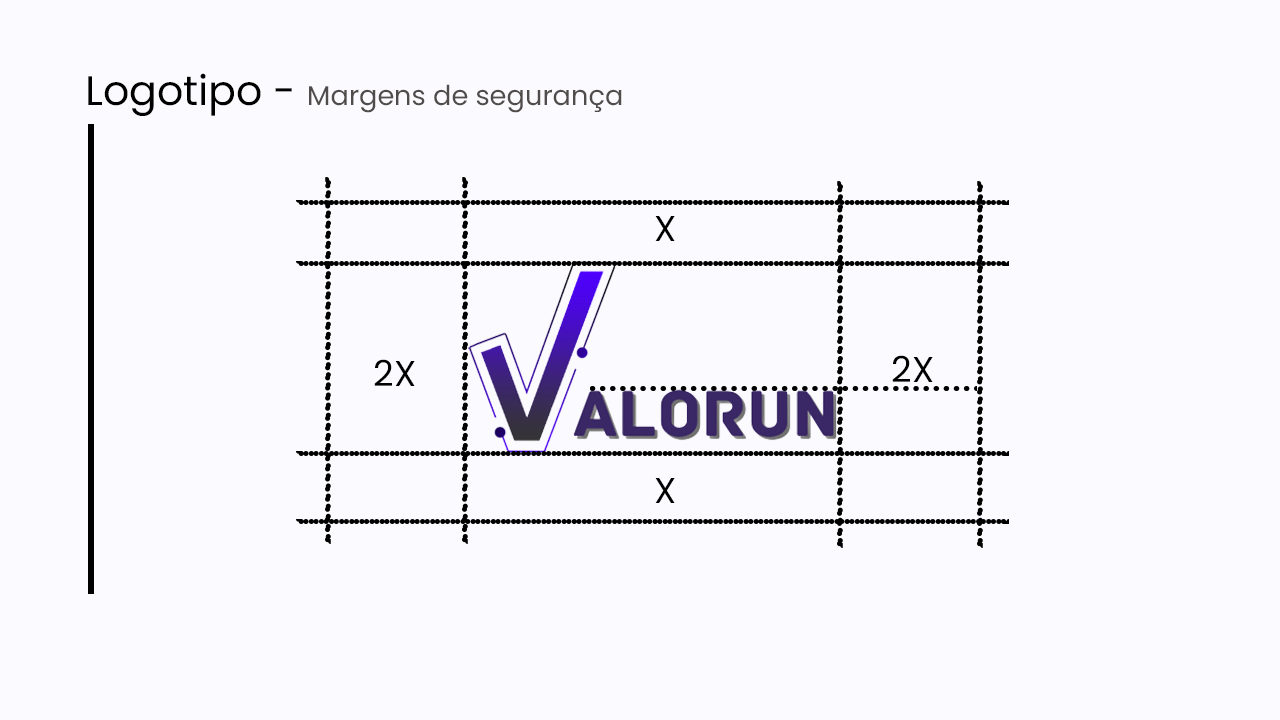
<style>
.page{position:relative;width:1280px;height:720px;background:#fbfbff}
.page>*{position:absolute;margin:0}
.t1{font:27.2px "Poppins-Regular";color:#514c4c}
.t2{font:41.2px "Poppins-Regular";color:#000000}
.t3{font:35.8px "Poppins-Regular";color:#000000}
</style>
<div class="page">
<p class="t1" style="left:88px;top:73px;width:534px;height:43px"><span class="t2">Logotipo - </span>Margens de segurança</p>
<p class="t3" style="left:655px;top:216px;width:20px;height:25px">X</p>
<p class="t3" style="left:374px;top:359px;width:41px;height:27px">2X</p>
<p class="t3" style="left:892px;top:355px;width:41px;height:27px">2X</p>
<p class="t3" style="left:655px;top:478px;width:20px;height:25px">X</p>
</div>
